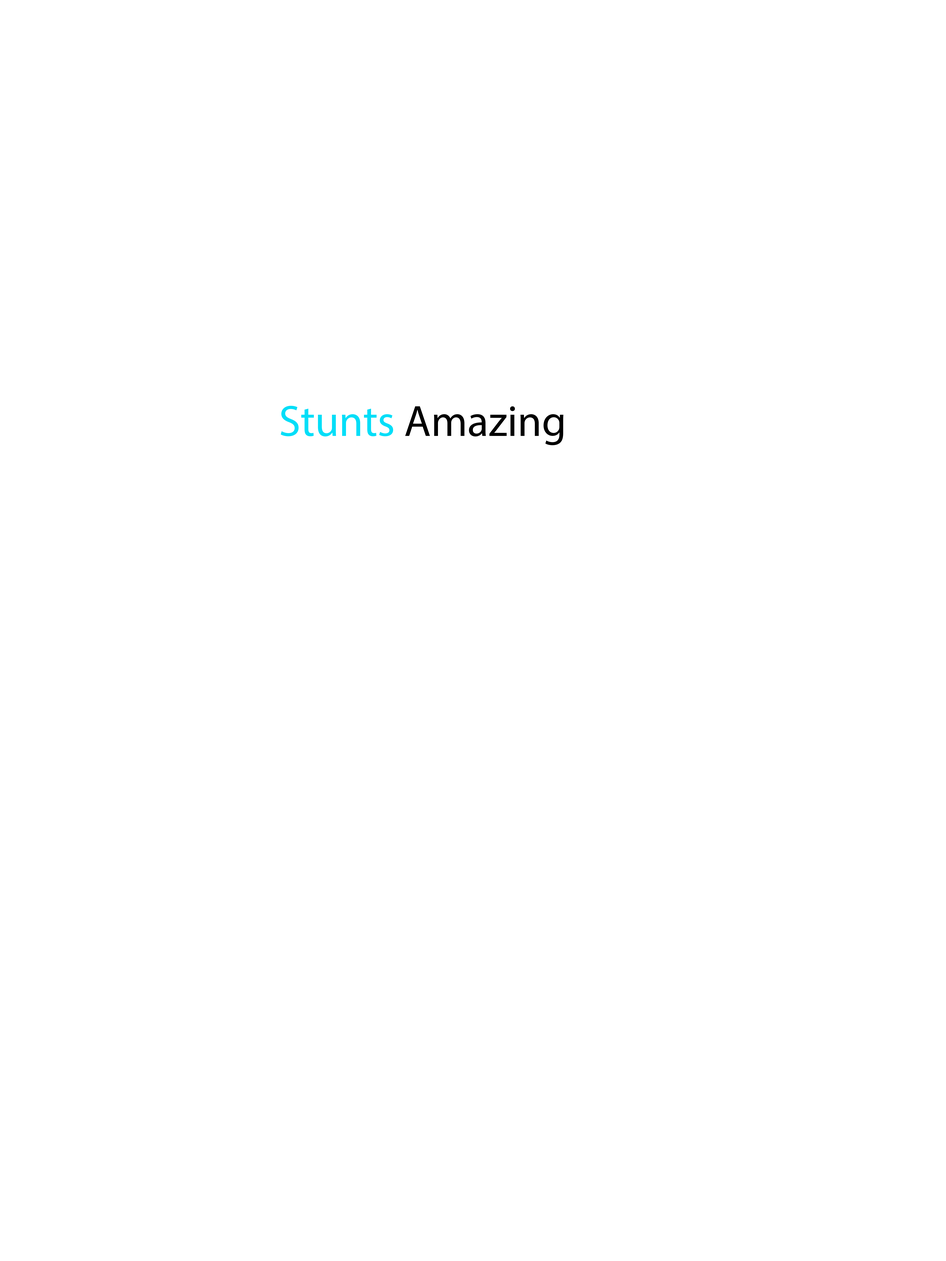
<style>
.page{position:relative;width:946px;height:1261px;background:#ffffff}
.page>*{position:absolute;margin:0}
.t1{font:43.8px "MyriadPro-Regular";color:#000000}
.t2{font:43.8px "MyriadPro-Regular";color:#02def8}
</style>
<div class="page">
<p class="t1" style="left:281px;top:406px;width:282px;height:39px"><span class="t2">Stunts</span> Amazing</p>
</div>
